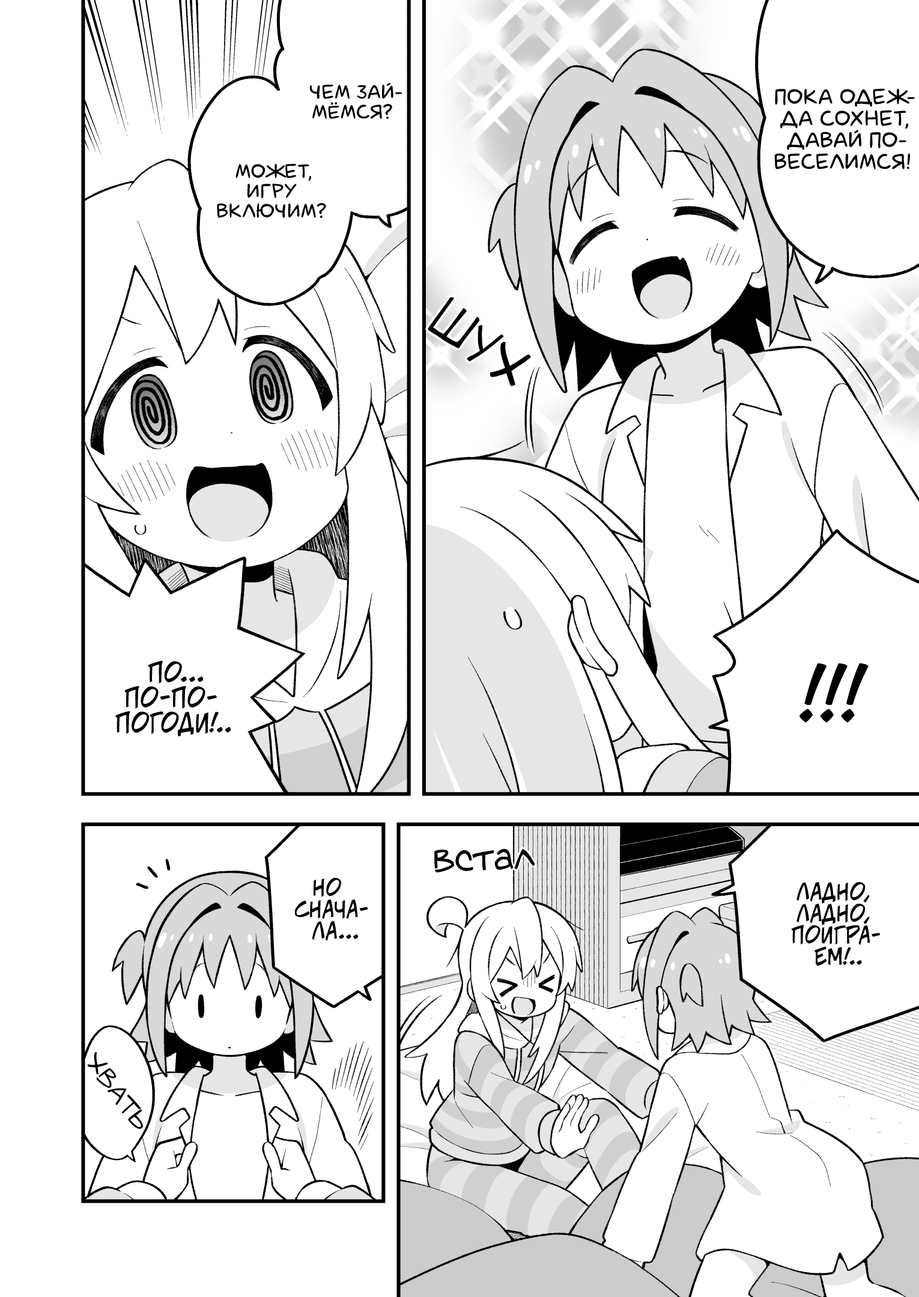
<style>
.page{position:relative;width:919px;height:1297px;background:#ffffff}
.page>*{position:absolute;margin:0}
.t1{font:19.8px "laCartoonerie";color:#000000;text-transform:uppercase}
.t2{font:21.6px "laCartoonerie";color:#000000;text-transform:uppercase}
.t3{font:54.1px "v_Augie";color:#000000;text-transform:uppercase;font-weight:bold;scale:0.8 1}
.t4{font:25.2px "v_CCJeffCampbell";color:#000000;text-transform:uppercase}
.t5{font:72.1px "v_CCJeffCampbell";color:#000000;text-transform:uppercase}
.t6{font:39.6px "v_Augie";color:#000000;scale:0.95 1}
.t7{font:21.6px "v_CCJeffCampbell";color:#000000;text-transform:uppercase}
.t8{font:23.4px "v_Augie";color:#000000;text-transform:uppercase}
</style>
<div class="page">
<p class="t1" style="left:309px;top:83px;width:93px;height:36px;text-align:center">Чем зай-<br>мёмся?</p>
<p class="t2" style="left:774px;top:88px;width:141px;height:81px;text-align:center">Пока одеж-<br>да сохнет,<br>Давай по-<br>веселимся!</p>
<p class="t1" style="left:217px;top:164px;width:109px;height:54px;text-align:center">Может,<br>игру<br>включим?</p>
<p class="t3" style="left:428px;top:297px;width:103px;height:89px;rotate:38deg">шух</p>
<p class="t4" style="left:115px;top:661px;width:116px;height:76px;text-align:center">По...<br>По-по-<br>погоди!..</p>
<p class="t5" style="left:800px;top:663px;width:69px;height:60px">!!!</p>
<p class="t6" style="left:434px;top:849px;width:101px;height:24px;rotate:-2deg">встал</p>
<p class="t7" style="left:294px;top:878px;width:74px;height:63px;text-align:center">Но<br>снача-<br>ла...</p>
<p class="t7" style="left:791px;top:882px;width:90px;height:84px;text-align:center">Ладно,<br>ладно,<br>поигра-<br>ем!..</p>
<p class="t8" style="left:88px;top:1052px;width:55px;height:77px;rotate:53deg">хвать</p>
</div>
